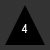
<style>
.page{position:relative;width:50px;height:50px;background:#333333}
.page>*{position:absolute;margin:0}
.t1{font:12px "ArialMT";color:#ffffff;scale:0.81 1}
</style>
<div class="page">
<p class="t1" style="left:21px;top:24px;width:7px;height:9px">4</p>
</div>
